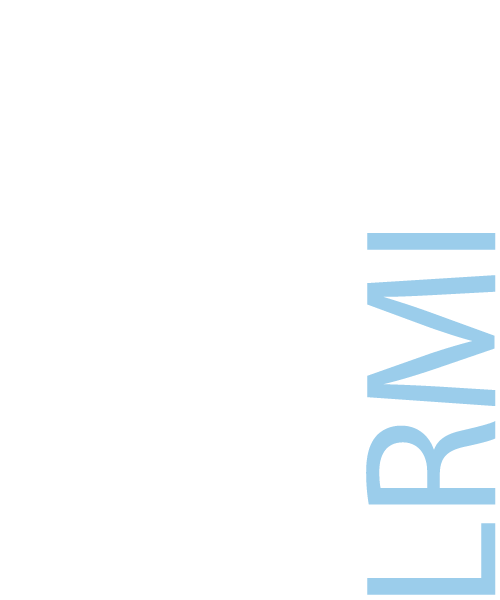
<style>
.page{position:relative;width:500px;height:600px;background:#ffffff}
.page>*{position:absolute;margin:0}
.t1{font:190px "MyriadPro-Regular";color:#9bcdeb;font-variant:small-caps}
</style>
<div class="page">
<p class="t1" style="left:366px;top:233px;width:130px;height:362px;rotate:-90deg">LRMI</p>
</div>
